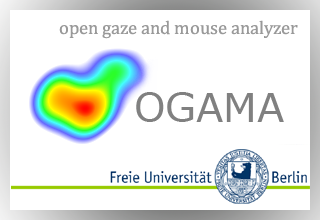
<style>
.page{position:relative;width:320px;height:220px;background:#ffffff}
.page>*{position:absolute;margin:0}
.t1{font:18.7px "Cambria";color:#999999}
.t2{font:40px "Verdana";color:#808080}
</style>
<div class="page">
<p class="t1" style="left:59px;top:20px;width:239px;height:19px">open gaze and mouse analyzer</p>
<p class="t2" style="left:136px;top:92px;width:148px;height:30px">OGAMA</p>
</div>
